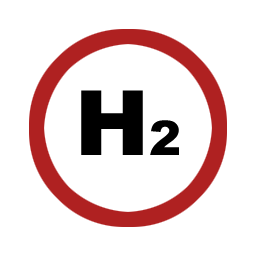
<style>
.page{position:relative;width:256px;height:256px;background:#ffffff}
.page>*{position:absolute;margin:0}
.t1{font:90px "Arial-Black";color:#000000}
.t2{font:48px "Arial-Black";color:#000000}
</style>
<div class="page">
<p class="t1" style="left:81px;top:90px;width:62px;height:65px">H</p>
<p class="t2" style="left:150px;top:120px;width:29px;height:35px">2</p>
</div>
